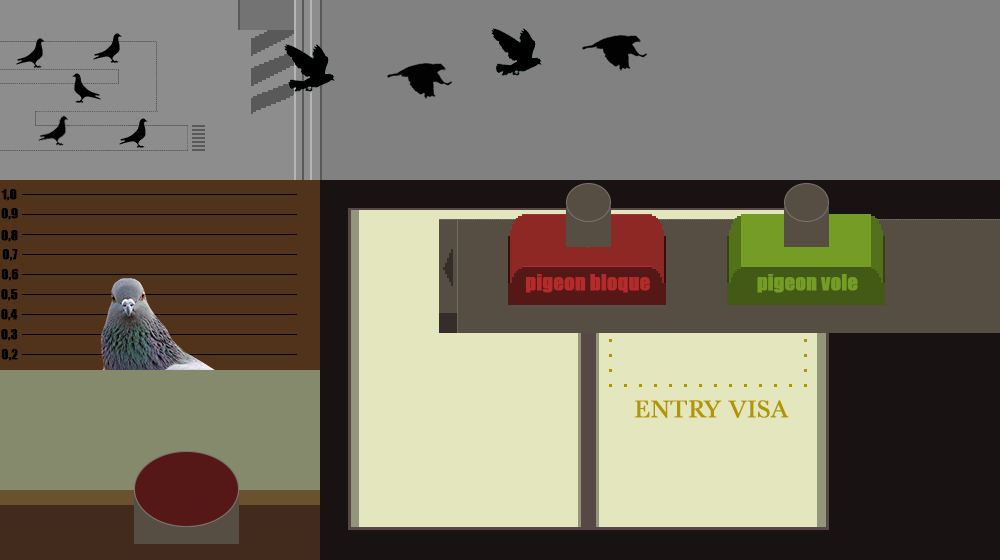
<style>
.page{position:relative;width:1000px;height:560px;background:#818181}
.page>*{position:absolute;margin:0}
.t1{font:13px "Impact";color:#000000;font-weight:bold}
.t2{font:20px "Impact";color:#b42b2b;font-weight:bold}
.t3{font:20px "Impact";color:#759d25;font-weight:bold}
.t4{font:25px "Baskerville";color:#b19600;font-weight:bold}
</style>
<div class="page">
<p class="t1" style="left:1px;top:189px;width:16px;height:12px">1,0</p>
<p class="t1" style="left:1px;top:208px;width:17px;height:12px">0,9</p>
<p class="t1" style="left:1px;top:230px;width:17px;height:12px">0,8</p>
<p class="t1" style="left:2px;top:249px;width:16px;height:12px">0,7</p>
<p class="t1" style="left:1px;top:269px;width:18px;height:12px">0,6</p>
<p class="t2" style="left:526px;top:274px;width:124px;height:19px">pigeon bloque</p>
<p class="t3" style="left:757px;top:274px;width:101px;height:19px">pigeon vole</p>
<p class="t1" style="left:1px;top:289px;width:17px;height:12px">0,5</p>
<p class="t1" style="left:1px;top:309px;width:17px;height:12px">0,4</p>
<p class="t1" style="left:1px;top:329px;width:17px;height:12px">0,3</p>
<p class="t1" style="left:1px;top:349px;width:17px;height:12px">0,2</p>
<p class="t4" style="left:634px;top:400px;width:155px;height:18px">ENTRY VISA</p>
</div>
